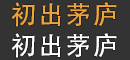
<style>
.page{position:relative;width:130px;height:60px;background:#333333}
.page>*{position:absolute;margin:0}
.t1{font:25.4px "AdobeHeitiStd-Regular";letter-spacing:0.075em;color:#eea43b}
.t2{font:25.4px "AdobeHeitiStd-Regular";letter-spacing:0.075em;color:#ffffff}
</style>
<div class="page">
<p class="t1" style="left:11px;top:2px;width:106px;height:25px">初出茅庐</p>
<p class="t2" style="left:11px;top:33px;width:106px;height:25px">初出茅庐</p>
</div>
